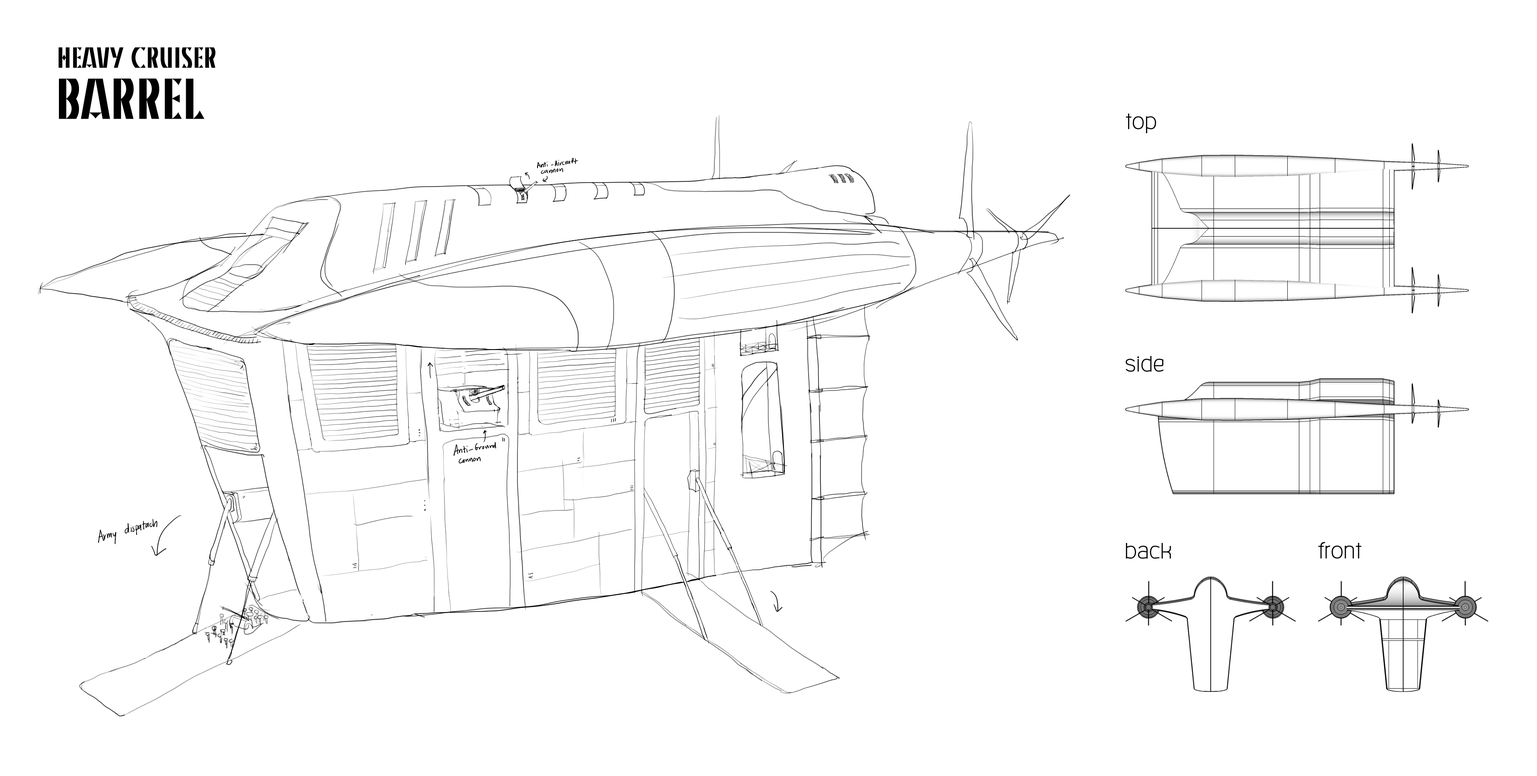
<style>
.page{position:relative;width:1537px;height:776px;background:#ffffff}
.page>*{position:absolute;margin:0}
.t1{font:29px "KinoMT";color:#000000}
.t2{font:57.2px "KinoMT";color:#000000}
.t3{font:29px "Kunlasatri";color:#000000}
</style>
<div class="page">
<p class="t1" style="left:58px;top:47px;width:158px;height:21px">HEAVY CRUISER</p>
<p class="t2" style="left:59px;top:79px;width:145px;height:40px">BARREL</p>
<p class="t3" style="left:1126px;top:114px;width:30px;height:19px">top</p>
<p class="t3" style="left:1125px;top:356px;width:38px;height:16px">side</p>
<p class="t3" style="left:1126px;top:543px;width:45px;height:16px">back</p>
<p class="t3" style="left:1318px;top:542px;width:43px;height:17px">front</p>
</div>
